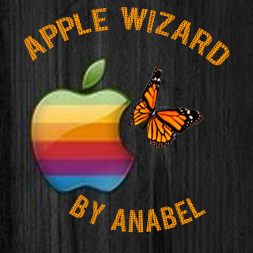
<style>
.page{position:relative;width:253px;height:253px}
.page>*{position:absolute;margin:0}
.t1{font:24px "DeliciousApplepie";color:#ff9900}
</style>
<div class="page">
<p class="t1" style="left:24px;top:7px;width:206px;height:59px">Apple wizard</p>
<p class="t1" style="left:69px;top:194px;width:137px;height:39px">by anabel</p>
</div>
